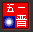
<style>
.page{position:relative;width:33px;height:32px;background:#f20000}
.page>*{position:absolute;margin:0}
.t1{font:10.4px "SimSun";color:#ffffff}
.t2{font:11.7px "SimSun";color:#ffffff}
</style>
<div class="page">
<p class="t1" style="left:7px;top:4px;width:18px;height:8px">五一</p>
<p class="t2" style="left:16px;top:15px;width:11px;height:12px">晋</p>
</div>
